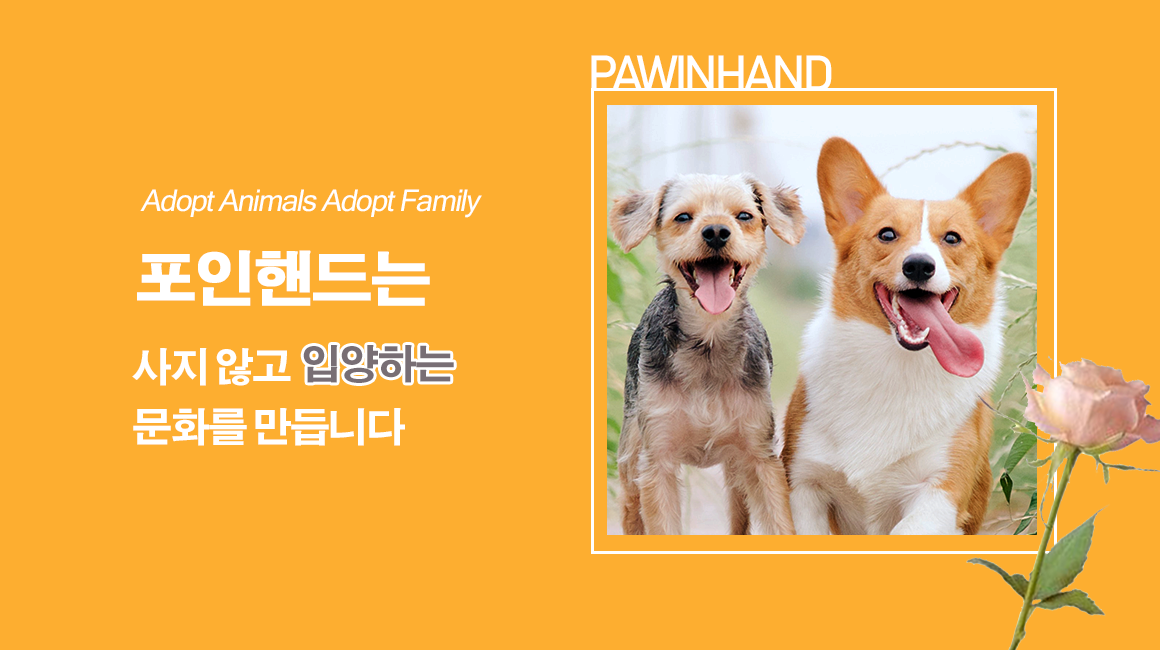
<style>
.page{position:relative;width:1160px;height:650px;background:#fdae30}
.page>*{position:absolute;margin:0}
.t1{font:50px "Bahnschrift";letter-spacing:-0.09em;color:#ffffff}
.t2{font:30px "MicrosoftSansSerif";letter-spacing:-0.05em;color:#ffffff;font-style:italic}
.t3{font:60px "H2gtrE";letter-spacing:-0.05em;color:#ffffff;font-weight:bold}
.t4{font:40px/60px "AdobeGothicStd-Bold";letter-spacing:-0.05em;color:#ffffff}
.t5{font:40px "AdobeGothicStd-Bold";letter-spacing:-0.05em;color:#786e74}
</style>
<div class="page">
<p class="t1" style="left:591px;top:55px;width:241px;height:36px">PAWINHAND</p>
<p class="t2" style="left:140px;top:189px;width:342px;height:29px">Adopt Animals Adopt Family</p>
<p class="t3" style="left:137px;top:250px;width:293px;height:56px">포인핸드는</p>
<p class="t4" style="left:132px;top:348px;width:273px;height:98px">사지 않고 <br>문화를 만듭니다</p>
<p class="t5" style="left:303px;top:345px;width:151px;height:38px">입양하는</p>
</div>
